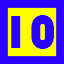
<style>
.page{position:relative;width:64px;height:64px;background:#2a00ff}
.page>*{position:absolute;margin:0}
.t1{font:48px "Bauhaus93";color:#2a00ff}
</style>
<div class="page">
<p class="t1" style="left:11px;top:15px;width:43px;height:34px">10</p>
</div>
